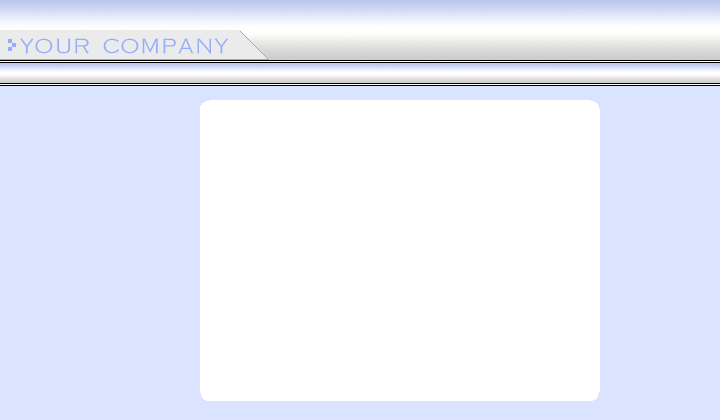
<style>
.page{position:relative;width:720px;height:420px;background:#ffffff}
.page>*{position:absolute;margin:0}
.t1{font:24px "CongaNormal";color:#93adff}
</style>
<div class="page">
<p class="t1" style="left:20px;top:38px;width:209px;height:16px">your company</p>
</div>
